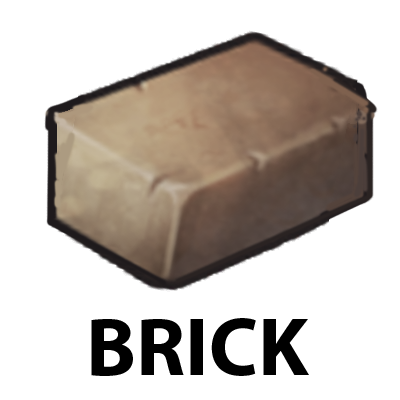
<style>
.page{position:relative;width:400px;height:400px;background:#ffffff}
.page>*{position:absolute;margin:0}
.t1{font:82.4px "MyriadPro-Bold";color:#000000}
</style>
<div class="page">
<p class="t1" style="left:91px;top:318px;width:218px;height:58px">BRICK</p>
</div>
